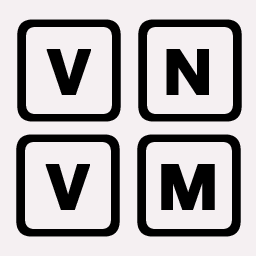
<style>
.page{position:relative;width:256px;height:256px;background:#f5f0f2}
.page>*{position:absolute;margin:0}
.t1{font:87px "SegoeKeycaps";letter-spacing:0.1em;color:#000000;font-weight:bold}
</style>
<div class="page">
<p class="t1" style="left:17px;top:19px;width:225px;height:103px">VN</p>
<p class="t1" style="left:16px;top:134px;width:225px;height:103px">VM</p>
</div>
